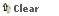
<style>
.page{position:relative;width:59px;height:16px;background:#ffffff}
.page>*{position:absolute;margin:0}
.t1{font:9px "Verdana-Bold";color:#5b5b5b}
</style>
<div class="page">
<p class="t1" style="left:14px;top:4px;width:25px;height:8px">Clear</p>
</div>
